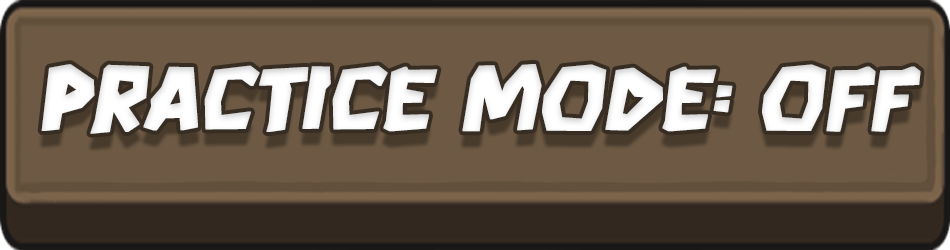
<style>
.page{position:relative;width:950px;height:250px;background:#6e5a44}
.page>*{position:absolute;margin:0}
.t1{font:91.7px "Boulder";letter-spacing:-0.025em;color:#ffffff;font-weight:bold;font-style:italic}
</style>
<div class="page">
<p class="t1" style="left:41px;top:64px;width:880px;height:70px">practice mode: off</p>
</div>
